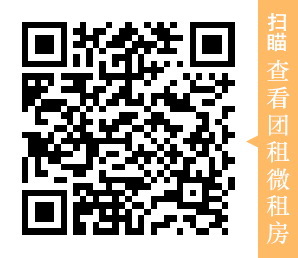
<style>
.page{position:relative;width:298px;height:258px;background:#ffffff}
.page>*{position:absolute;margin:0}
.t1{font:20px "SimHei";color:#ffffff;font-weight:bold}
.t2{font:24px "STZhongsong";color:#ffffff}
</style>
<div class="page">
<p class="t1" style="left:267px;top:13px;width:20px;height:39px">扫<br>瞄</p>
<p class="t2" style="left:266px;top:59px;width:24px;height:185px"><span class="t1"><br></span>查<br>看<br>团<br>租<br>微<br>租<br>房</p>
</div>
